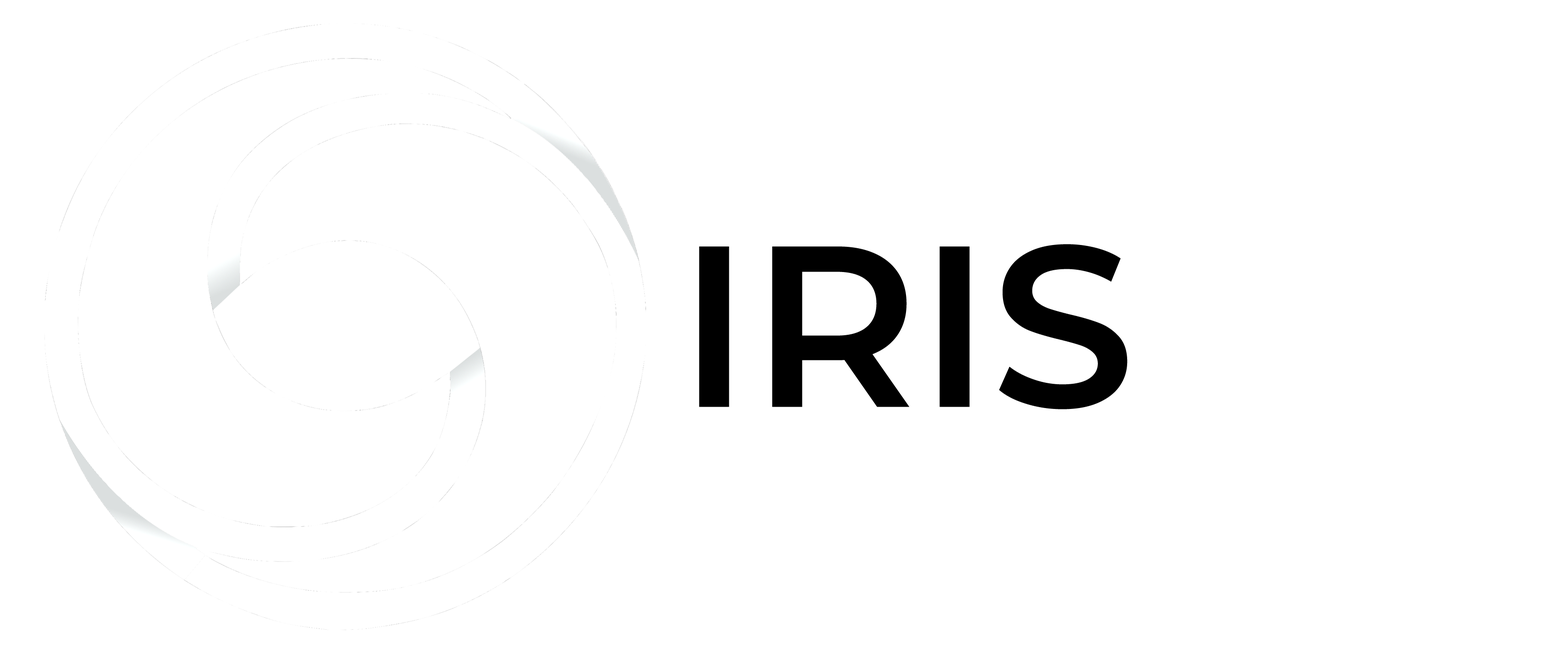
<style>
.page{position:relative;width:1568px;height:648px;background:#ffffff}
.page>*{position:absolute;margin:0}
.t1{font:228.9px "Montserrat-SemiBold";color:#000000}
</style>
<div class="page">
<p class="t1" style="left:699px;top:244px;width:429px;height:165px">IRIS</p>
</div>
